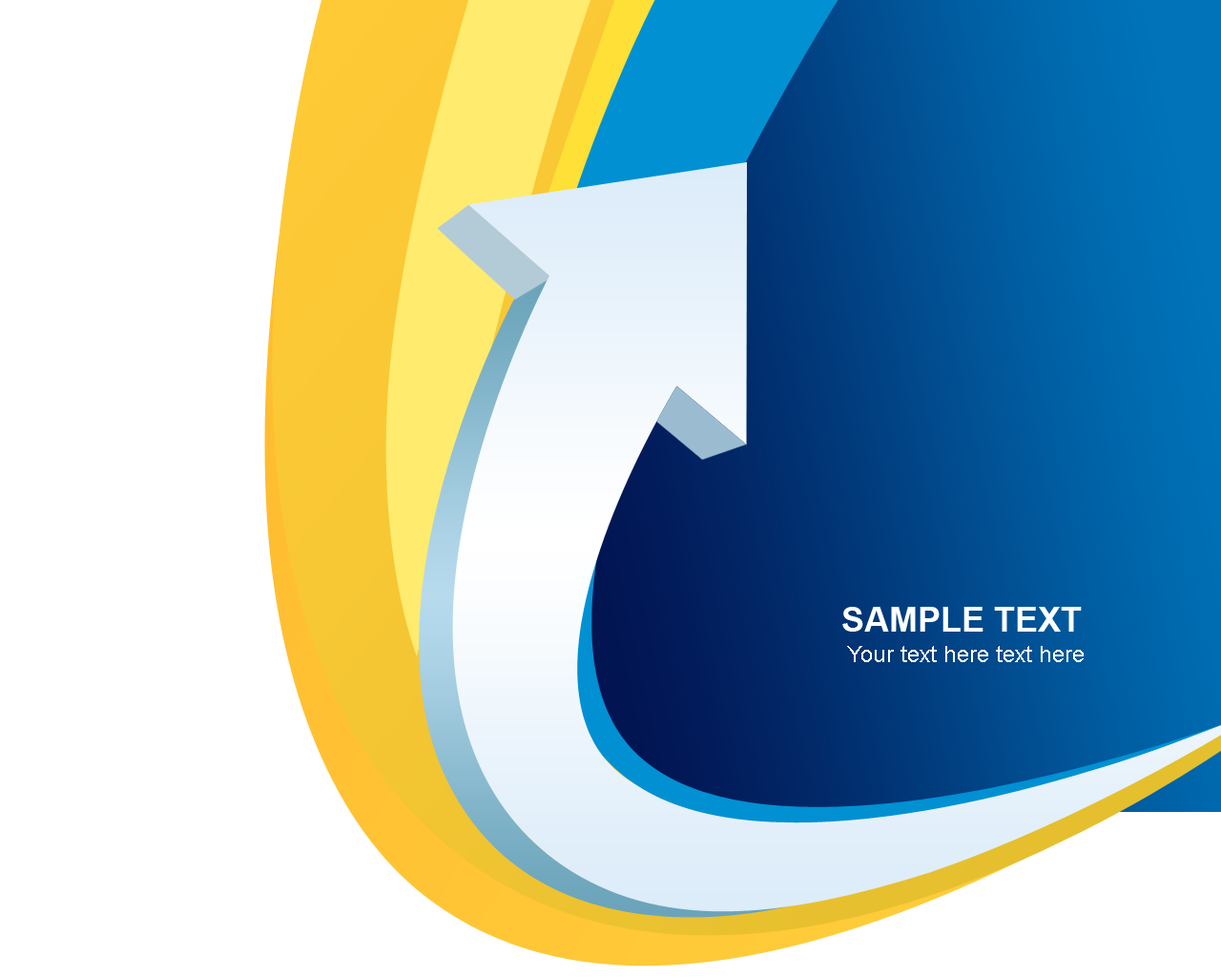
<style>
.page{position:relative;width:1221px;height:977px;background:#ffffff}
.page>*{position:absolute;margin:0}
.t1{font:34.3px "Arial-BoldMT";color:#ffffff}
.t2{font:22.9px "ArialMT";color:#ffffff}
</style>
<div class="page">
<p class="t1" style="left:842px;top:607px;width:240px;height:24px">SAMPLE TEXT</p>
<p class="t2" style="left:847px;top:646px;width:237px;height:16px">Your text here text here</p>
</div>
